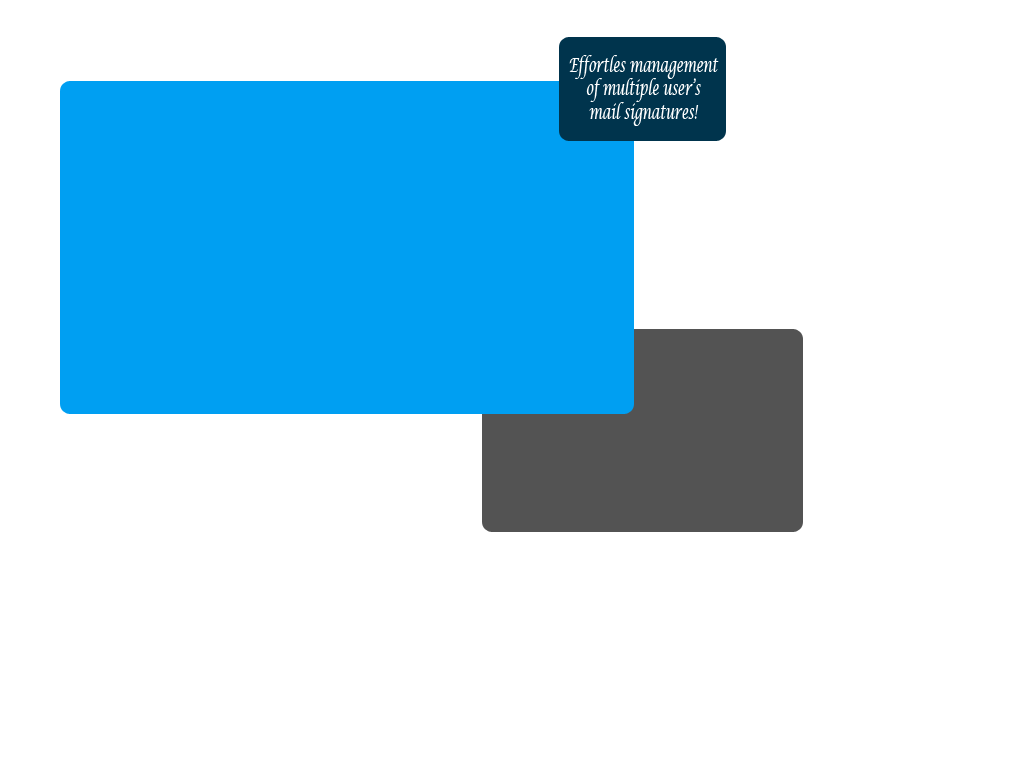
<style>
.page{position:relative;width:1024px;height:768px;background:#ffffff}
.page>*{position:absolute;margin:0}
.t1{font:19.7px "LucidaCalligraphy-Italic";color:#ffffff;scale:0.64 1}
</style>
<div class="page">
<p class="t1" style="left:569px;top:55px;width:150px;height:71px;text-align:center">Effortles management<br>of multiple user’s<br>mail signatures!</p>
</div>
